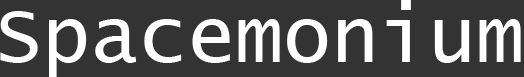
<style>
.page{position:relative;width:524px;height:77px;background:#333333}
.page>*{position:absolute;margin:0}
.t1{font:80px "LucidaConsole";color:#ffffff}
</style>
<div class="page">
<p class="t1" style="left:0px;top:0px;width:521px;height:77px">Spacemonium</p>
</div>
